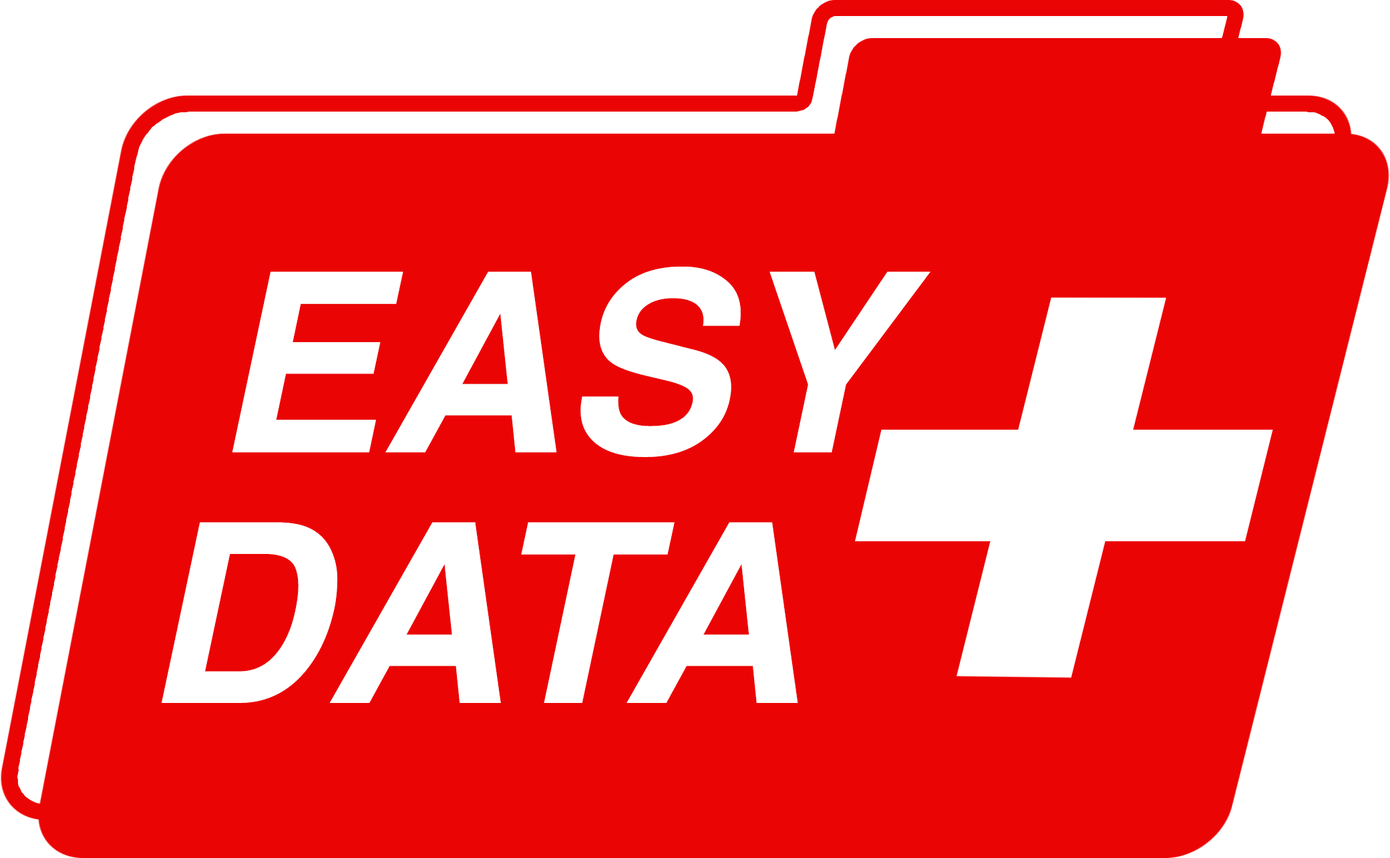
<style>
.page{position:relative;width:1390px;height:858px;background:#eb0404}
.page>*{position:absolute;margin:0}
.t1{font:250.5px/250.5px "Helvetica-BoldOblique";color:#ffffff}
</style>
<div class="page">
<p class="t1" style="left:162px;top:267px;width:769px;height:436px">EASY<br>DATA</p>
</div>
